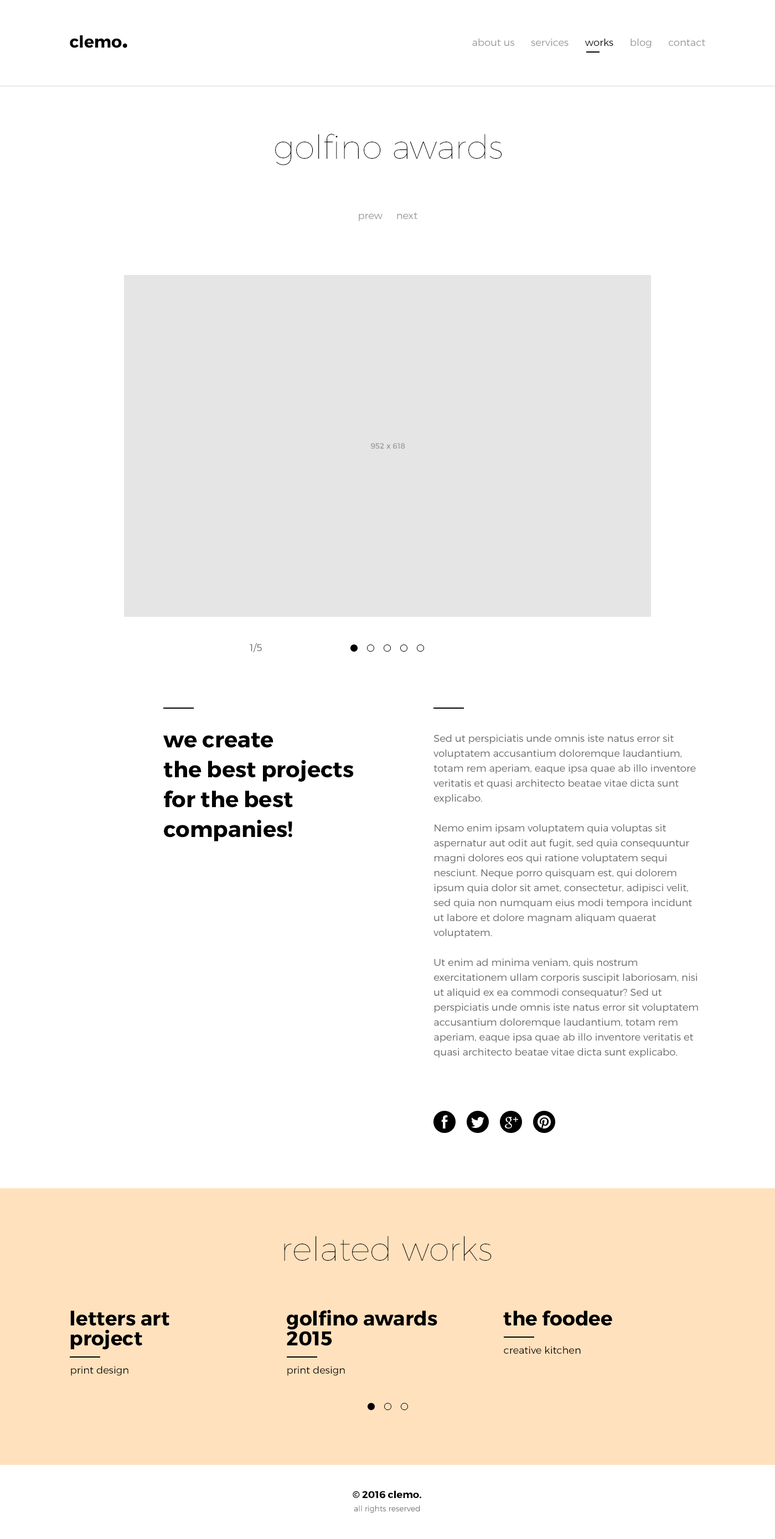
<style>
.page{position:relative;width:775px;height:1539px;background:#ffffff}
.page>*{position:absolute;margin:0}
.t1{font:16.6px "Montserrat-Bold";color:#000000}
.t2{font:26.6px "Montserrat-Bold";color:#000000}
.t3{font:10px "Montserrat-Light";color:#989898}
.t4{font:10px "Montserrat-Light";color:#000000}
.t5{font:33.2px "Montserrat-Hairline";color:#000000}
.t6{font:7.7px "Montserrat-Regular";color:#999999}
.t7{font:10px "Montserrat-Light";color:#656565}
.t8{font:22.1px/29.9px "Montserrat-Bold";color:#000000}
.t9{font:10px/14.9px "Montserrat-Light";color:#656565}
.t10{font:19.9px/19.9px "Montserrat-Bold";color:#000000}
.t11{font:19.9px "Montserrat-Bold";color:#000000}
.t12{font:7.7px/13.3px "Montserrat-Light";color:#656565}
.t13{font:10px/13.3px "Montserrat-Bold";color:#000000}
</style>
<div class="page">
<p class="t1" style="left:70px;top:35px;width:57px;height:13px">clemo<span class="t2">.</span></p>
<p class="t3" style="left:472px;top:38px;width:233px;height:10px">about us      services      <span class="t4">works</span>      blog      contact</p>
<p class="t5" style="left:275px;top:134px;width:227px;height:31px">golfino awards</p>
<p class="t3" style="left:359px;top:212px;width:58px;height:9px">prew     next</p>
<p class="t6" style="left:371px;top:443px;width:34px;height:6px">952 x 618</p>
<p class="t7" style="left:250px;top:643px;width:12px;height:10px">1/5</p>
<p class="t8" style="left:163px;top:733px;width:191px;height:109px">we create<br>the best projects<br>for the best<br>companies!</p>
<p class="t9" style="left:433px;top:734px;width:265px;height:324px">Sed ut perspiciatis unde omnis iste natus error sit voluptatem accusantium doloremque laudantium, totam rem aperiam, eaque ipsa quae ab illo inventore veritatis et quasi architecto beatae vitae dicta sunt explicabo. <br><br>Nemo enim ipsam voluptatem quia voluptas sit aspernatur aut odit aut fugit, sed quia consequuntur magni dolores eos qui ratione voluptatem sequi nesciunt. Neque porro quisquam est, qui dolorem ipsum quia dolor sit amet, consectetur, adipisci velit, sed quia non numquam eius modi tempora incidunt ut labore et dolore magnam aliquam quaerat voluptatem.<br><br>Ut enim ad minima veniam, quis nostrum exercitationem ullam corporis suscipit laboriosam, nisi ut aliquid ex ea commodi consequatur? Sed ut perspiciatis unde omnis iste natus error sit voluptatem accusantium doloremque laudantium, totam rem aperiam, eaque ipsa quae ab illo inventore veritatis et quasi architecto beatae vitae dicta sunt explicabo.</p>
<p class="t5" style="left:284px;top:1236px;width:207px;height:25px">related works</p>
<p class="t10" style="left:70px;top:1311px;width:99px;height:39px">letters art<br>project</p>
<p class="t10" style="left:287px;top:1310px;width:150px;height:36px">golfino awards<br>2015</p>
<p class="t11" style="left:503px;top:1311px;width:109px;height:15px">the foodee</p>
<p class="t4" style="left:504px;top:1346px;width:76px;height:8px">creative kitchen</p>
<p class="t4" style="left:71px;top:1366px;width:57px;height:10px">print design</p>
<p class="t4" style="left:287px;top:1366px;width:58px;height:10px">print design</p>
<p class="t12" style="left:352px;top:1491px;width:69px;height:22px;text-align:center"><span class="t13">© 2016 clemo.<br></span>all rights reserved</p>
</div>
